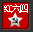
<style>
.page{position:relative;width:33px;height:32px;background:#c50000}
.page>*{position:absolute;margin:0}
.t1{font:10.4px "SimSun";letter-spacing:-0.25em;color:#ffffff}
</style>
<div class="page">
<p class="t1" style="left:4px;top:4px;width:24px;height:9px">红六四</p>
</div>
